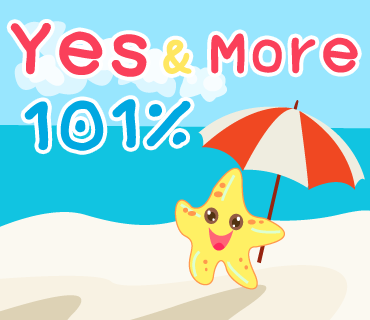
<style>
.page{position:relative;width:370px;height:320px;background:#98e6fe}
.page>*{position:absolute;margin:0}
.t1{font:136px "2005_iannnnnMTV";letter-spacing:0.025em;color:#fa405a;scale:1.06 1}
.t2{font:88px "2005_iannnnnMTV";letter-spacing:0.025em;color:#ffe761;scale:1.06 1}
.t3{font:109px "2005_iannnnnMTV";letter-spacing:0.025em;color:#fa405a;scale:1.06 1}
.t4{font:140px "2005_iannnnnMTV";letter-spacing:0.025em;color:#00a8e1;scale:1.06 1}
</style>
<div class="page">
<p class="t1" style="left:10px;top:23px;width:137px;height:54px;rotate:2deg">Yes</p>
<p class="t2" style="left:163px;top:39px;width:29px;height:35px;rotate:2deg">&amp;</p>
<p class="t3" style="left:211px;top:33px;width:147px;height:41px">More</p>
<p class="t4" style="left:24px;top:99px;width:167px;height:52px;rotate:-1deg">101%</p>
</div>
